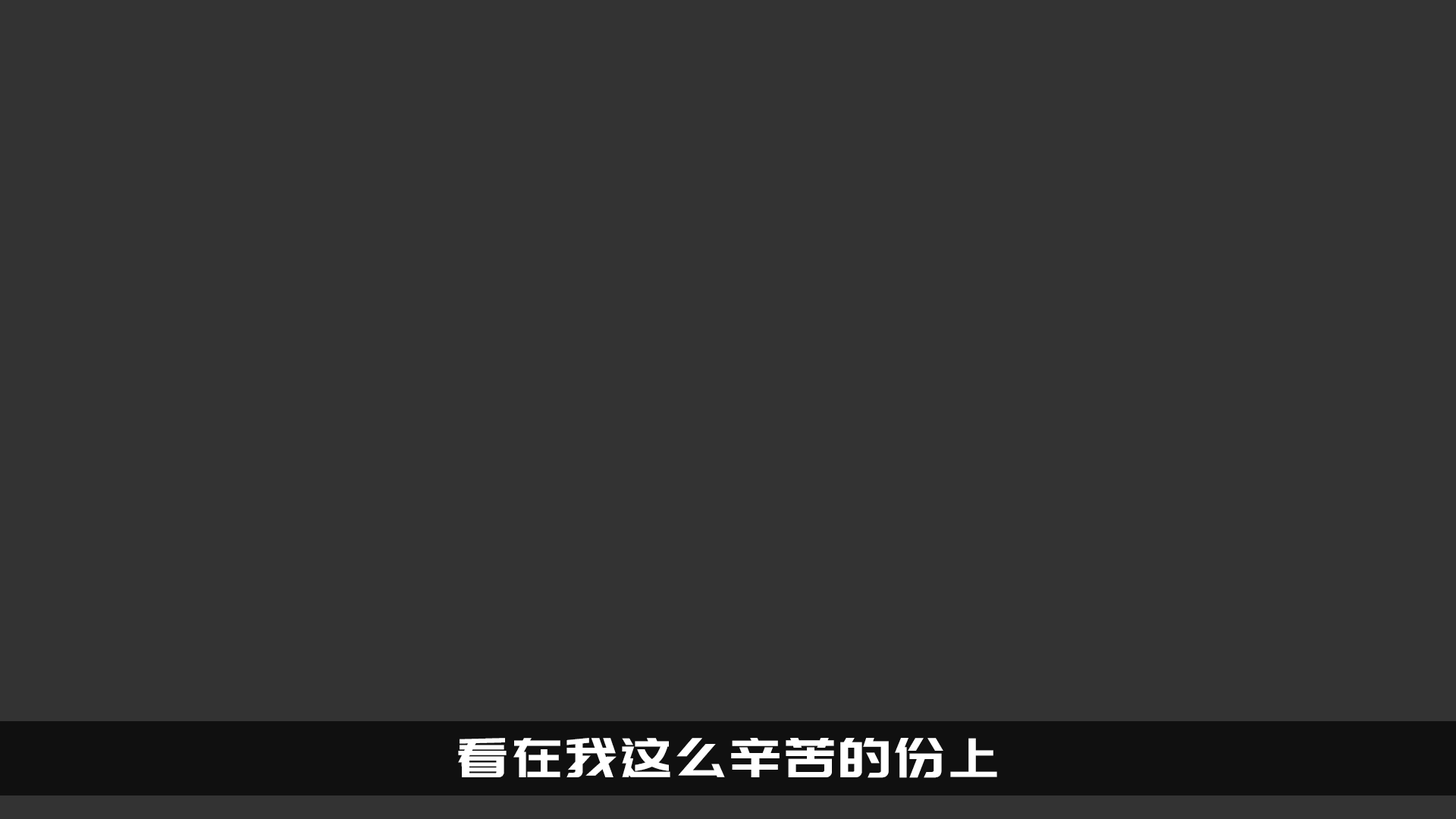
<style>
.page{position:relative;width:1456px;height:819px;background:#333333}
.page>*{position:absolute;margin:0}
.t1{font:54.6px "PangMenZhengDao-3";color:#ffffff}
</style>
<div class="page">
<p class="t1" style="left:458px;top:738px;width:539px;height:40px">看在我这么辛苦的份上</p>
</div>
